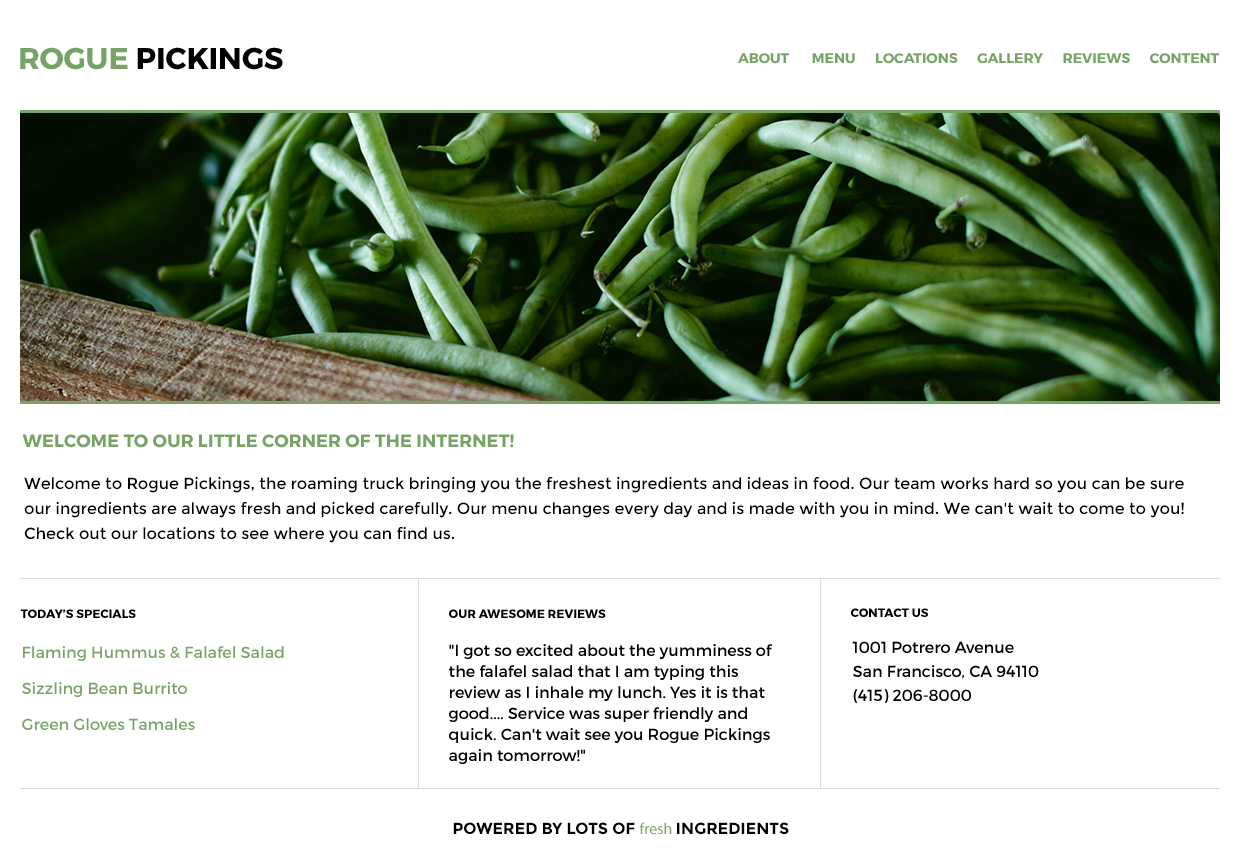
<style>
.page{position:relative;width:1240px;height:868px;background:#ffffff}
.page>*{position:absolute;margin:0}
.t1{font:30px "Montserrat-Bold";color:#000000;text-transform:uppercase}
.t2{font:30px "Montserrat-Bold";color:#77a466;text-transform:uppercase}
.t3{font:14px "Montserrat-Bold";color:#77a466;text-transform:uppercase}
.t4{font:18px "Montserrat-Bold";color:#77a466;text-transform:uppercase}
.t5{font:16px/25px "Montserrat-Regular";color:#000000}
.t6{font:12px "Montserrat-Bold";color:#000000;text-transform:uppercase}
.t7{font:16px/24px "Montserrat-Regular";color:#000000}
.t8{font:16px/18px "Montserrat-Regular";color:#77a466}
.t9{font:16px/18px "Montserrat-Regular";color:#000000}
.t10{font:16px/21px "Montserrat-Regular";color:#000000}
.t11{font:16px "Montserrat-Bold";color:#000000;text-transform:uppercase}
.t12{font:16px "MyriadPro-Regular";color:#77a466}
</style>
<div class="page">
<p class="t1" style="left:20px;top:47px;width:263px;height:23px"><span class="t2">Rogue </span>Pickings</p>
<p class="t3" style="left:738px;top:53px;width:481px;height:11px">about       menu      locations      GALLERY      REVIEWS      CONTENT</p>
<p class="t4" style="left:22px;top:434px;width:492px;height:14px">Welcome to our little corner of the internet!</p>
<p class="t5" style="left:24px;top:476px;width:1160px;height:67px">Welcome to Rogue Pickings, the roaming truck bringing you the freshest ingredients and ideas in food. Our team works hard so you can be sure our ingredients are always fresh and picked carefully. Our menu changes every day and is made with you in mind. We can't wait to come to you! Check out our locations to see where you can find us.</p>
<p class="t6" style="left:20px;top:609px;width:116px;height:9px">Today’s Specials</p>
<p class="t6" style="left:449px;top:609px;width:157px;height:9px">OUR AWESOME REVIEWS</p>
<p class="t6" style="left:851px;top:608px;width:77px;height:9px">CONTACT US</p>
<p class="t7" style="left:852px;top:641px;width:187px;height:62px">1001 Potrero Avenue<br>San Francisco, CA 94110<br>(415) 206-8000</p>
<p class="t8" style="left:22px;top:646px;width:262px;height:84px"><span class="t9"><br></span>    Flaming Hummus &amp; Falafel Salad<br><br>    Sizzling Bean Burrito<br><br>    Green Gloves Tamales</p>
<p class="t10" style="left:449px;top:644px;width:324px;height:120px">"I got so excited about the yumminess of the falafel salad that I am typing this review as I inhale my lunch. Yes it is that good.... Service was super friendly and quick. Can't wait see you Rogue Pickings again tomorrow!"</p>
<p class="t11" style="left:453px;top:822px;width:336px;height:13px">Powered By Lots of <span class="t12">fresh </span>Ingredients</p>
</div>
